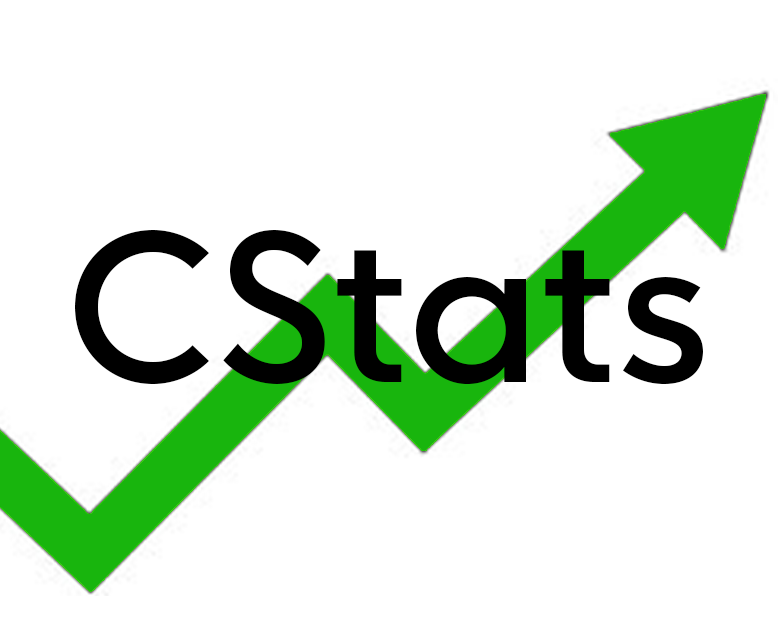
<style>
.page{position:relative;width:778px;height:641px;background:#ffffff}
.page>*{position:absolute;margin:0}
.t1{font:200px "HKNova-Medium";color:#000000}
</style>
<div class="page">
<p class="t1" style="left:75px;top:230px;width:628px;height:155px">CStats</p>
</div>
